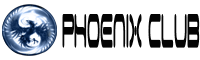
<style>
.page{position:relative;width:200px;height:60px;background:#ffffff}
.page>*{position:absolute;margin:0}
.t1{font:76.2px "SpaceAge";color:#040404;scale:0.19 1}
</style>
<div class="page">
<p class="t1" style="left:62px;top:14px;width:138px;height:34px">PHOENIX CLUB</p>
</div>
